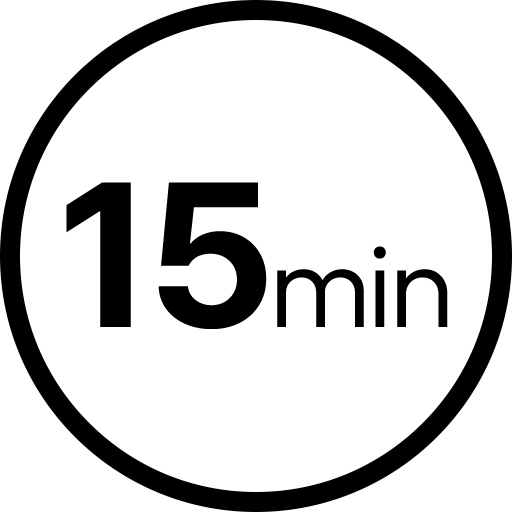
<style>
.page{position:relative;width:512px;height:512px;background:#ffffff}
.page>*{position:absolute;margin:0}
.t1{font:120px "Outfit-Light";letter-spacing:-0.03em;color:#000000}
.t2{font:204.3px "PretendardVariable-Bold";letter-spacing:-0.03em;color:#000000}
</style>
<div class="page">
<p class="t1" style="left:66px;top:182px;width:382px;height:147px"><span class="t2">15</span>min</p>
</div>
